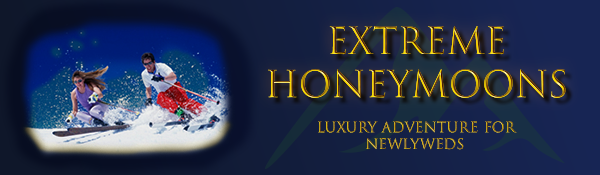
<style>
.page{position:relative;width:600px;height:175px}
.page>*{position:absolute;margin:0}
.t1{font:36px "TrajanColor-Concept"}
.t2{font:14px "TrajanColor-Concept"}
</style>
<div class="page">
<p class="t1" style="left:268px;top:26px;width:298px;height:72px;text-align:center">Extreme Honeymoons</p>
<p class="t2" style="left:318px;top:121px;width:199px;height:29px;text-align:center">Luxury adventure for newlyweds</p>
</div>
